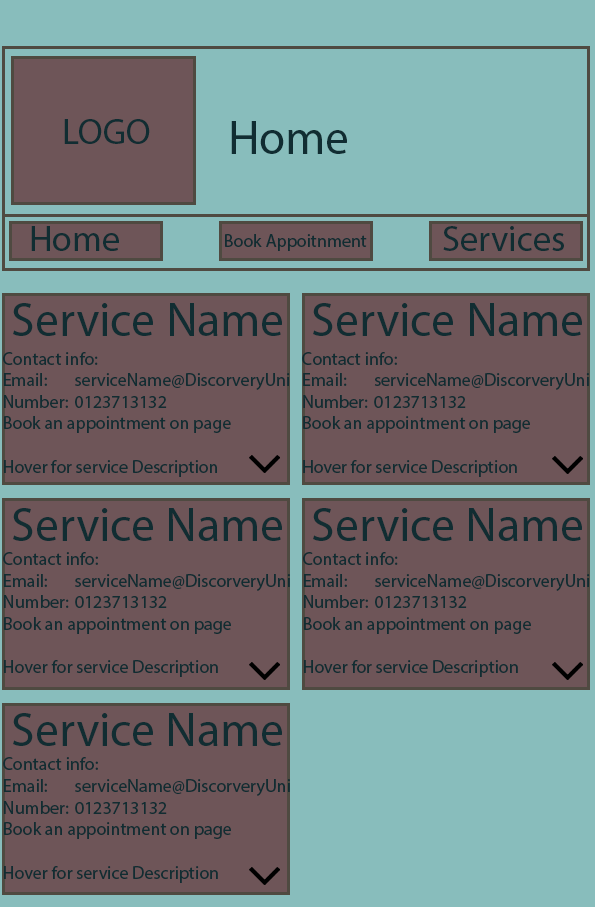
<style>
.page{position:relative;width:595px;height:907px;background:#6e5558}
.page>*{position:absolute;margin:0}
.t1{font:36px "MyriadPro-Regular";color:#112d32}
.t2{font:18px "MyriadPro-Regular";color:#112d32}
.t3{font:48px "MyriadPro-Regular";color:#112d32}
.t4{font:48.2px "MyriadPro-Regular";color:#112d32}
</style>
<div class="page">
<p class="t1" style="left:64px;top:119px;width:86px;height:25px"><span class="t2"><br><br>     </span>LOGO</p>
<p class="t3" style="left:231px;top:121px;width:116px;height:33px">Home</p>
<p class="t1" style="left:31px;top:226px;width:88px;height:25px">Home</p>
<p class="t1" style="left:443px;top:226px;width:121px;height:25px">Services</p>
<p class="t2" style="left:225px;top:234px;width:142px;height:17px">Book Appoitnment</p>
<p class="t3" style="left:13px;top:303px;width:269px;height:33px">Service Name</p>
<p class="t3" style="left:313px;top:303px;width:269px;height:33px">Service Name</p>
<p class="t2" style="left:3px;top:352px;width:287px;height:125px">Contact info:<br>Email: serviceName@DiscorveryUni<br>Number:  0123713132<br>Book an appointment on page<br><br>Hover for service Description</p>
<p class="t2" style="left:302px;top:352px;width:287px;height:125px">Contact info:<br>Email: serviceName@DiscorveryUni<br>Number:  0123713132<br>Book an appointment on page<br><br>Hover for service Description</p>
<p class="t4" style="left:13px;top:508px;width:269px;height:33px">Service Name</p>
<p class="t4" style="left:313px;top:508px;width:269px;height:33px">Service Name</p>
<p class="t2" style="left:3px;top:552px;width:287px;height:125px">Contact info:<br>Email: serviceName@DiscorveryUni<br>Number:  0123713132<br>Book an appointment on page<br><br>Hover for service Description</p>
<p class="t2" style="left:303px;top:552px;width:287px;height:125px">Contact info:<br>Email: serviceName@DiscorveryUni<br>Number:  0123713132<br>Book an appointment on page<br><br>Hover for service Description</p>
<p class="t4" style="left:13px;top:713px;width:269px;height:33px">Service Name</p>
<p class="t2" style="left:3px;top:757px;width:287px;height:126px">Contact info:<br>Email: serviceName@DiscorveryUni<br>Number:  0123713132<br>Book an appointment on page<br><br>Hover for service Description</p>
</div>
